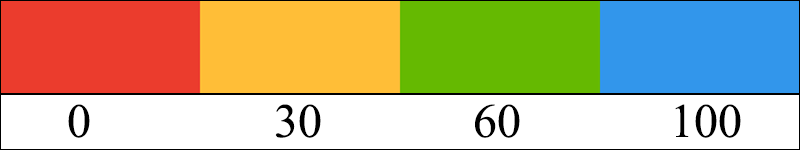
<style>
.page{position:relative;width:800px;height:150px;background:#ffffff}
.page>*{position:absolute;margin:0}
.t1{font:48px "TimesNewRomanPSMT";color:#000000}
</style>
<div class="page">
<p class="t1" style="left:68px;top:104px;width:22px;height:34px">0</p>
<p class="t1" style="left:275px;top:104px;width:46px;height:34px">30</p>
<p class="t1" style="left:475px;top:104px;width:45px;height:34px">60</p>
<p class="t1" style="left:675px;top:104px;width:66px;height:34px">100</p>
</div>
